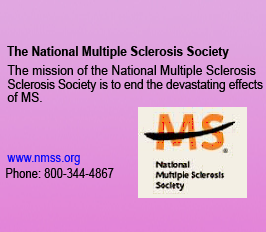
<style>
.page{position:relative;width:266px;height:232px}
.page>*{position:absolute;margin:0}
.t1{font:13px "Arial-BoldMT";color:#000000;scale:0.92 1}
.t2{font:13px "ArialMT";color:#000000;scale:0.95 1}
.t3{font:13px "ArialMT";color:#000000;scale:0.89 1}
.t4{font:13px "ArialMT";color:#000000;scale:0.93 1}
.t5{font:13px "ArialMT";color:#0b0bf9;scale:0.86 1}
.t6{font:13px "ArialMT";color:#000000;scale:0.86 1}
</style>
<div class="page">
<p class="t1" style="left:7px;top:46px;width:222px;height:13px">The National Multiple Sclerosis Society</p>
<p class="t2" style="left:7px;top:65px;width:249px;height:13px">The mission of the National Multiple Sclerosis</p>
<p class="t3" style="left:7px;top:79px;width:256px;height:13px">Sclerosis Society is to end the devastating effects</p>
<p class="t4" style="left:7px;top:92px;width:35px;height:10px">of MS.</p>
<p class="t5" style="left:7px;top:155px;width:73px;height:10px">www.nmss.org</p>
<p class="t6" style="left:6px;top:168px;width:108px;height:10px">Phone: 800-344-4867</p>
</div>
